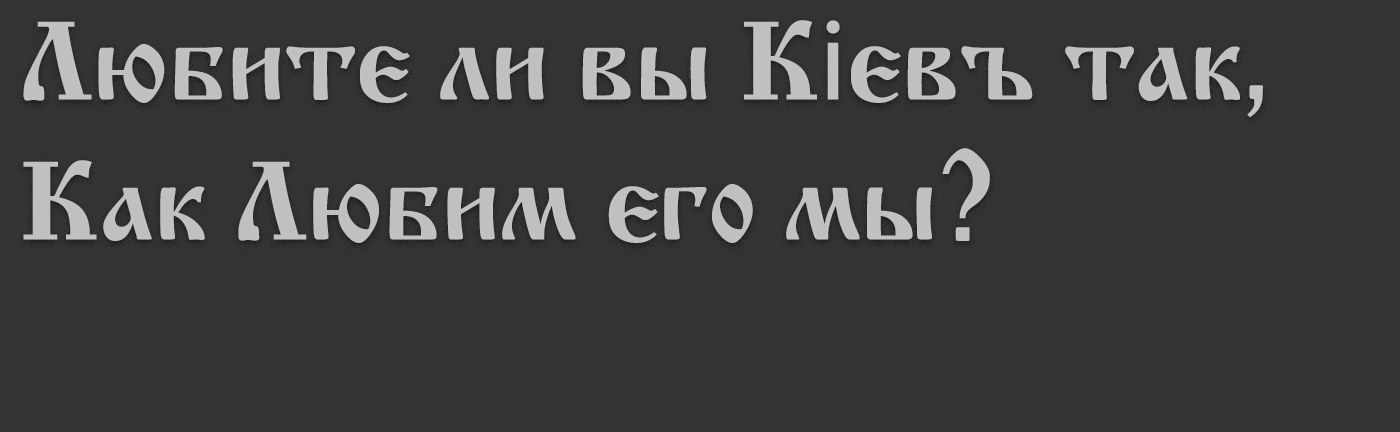
<style>
.page{position:relative;width:1400px;height:432px;background:#333333}
.page>*{position:absolute;margin:0}
.t1{font:116.7px "CyrillicOld";color:#c1c1c1}
.t2{font:116.7px "MyriadPro-Regular";color:#c1c1c1}
</style>
<div class="page">
<p class="t1" style="left:23px;top:20px;width:1240px;height:223px">Любите ли вы К<span class="t2">і</span>евъ так,<br>Как Любим его мы?</p>
</div>
